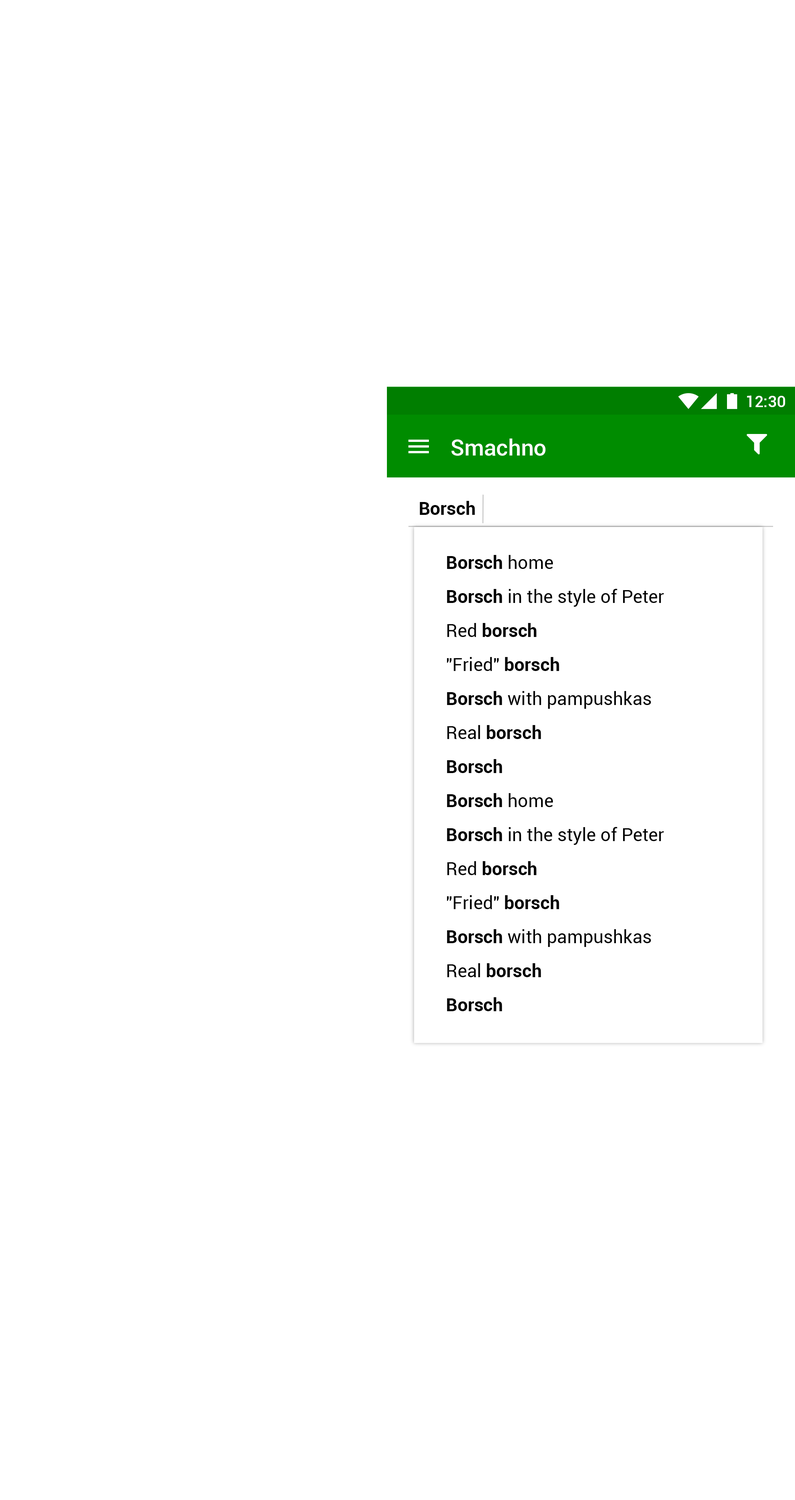
<style>
.page{position:relative;width:795px;height:1500px;background:#ffffff}
.page>*{position:absolute;margin:0}
.t1{font:15.9px "Roboto-Medium";color:#ffffff}
.t2{font:22.7px "Roboto-Medium";color:#ffffff}
.t3{font:18.1px "Roboto-Bold";color:#000000}
.t4{font:18.1px/34px "Roboto-Regular";color:#000000}
.t5{font:18.1px/34px "Roboto-Bold";color:#000000}
</style>
<div class="page">
<p class="t1" style="left:747px;top:395px;width:38px;height:12px">12:30</p>
<p class="t2" style="left:452px;top:438px;width:94px;height:18px">Smachno</p>
<p class="t3" style="left:420px;top:501px;width:55px;height:14px">Borsch</p>
<p class="t4" style="left:447px;top:555px;width:217px;height:456px"><span class="t5">Borsch</span> home<br><span class="t5">Borsch</span> in the style of Peter<br>Red <span class="t5">borsch<br></span>"Fried" <span class="t5">borsch<br>Borsch</span> with pampushkas<br>Real <span class="t5">borsch<br>Borsch<br>Borsch</span> home<br><span class="t5">Borsch</span> in the style of Peter<br>Red <span class="t5">borsch<br></span>"Fried" <span class="t5">borsch<br>Borsch</span> with pampushkas<br>Real <span class="t5">borsch<br>Borsch</span></p>
</div>
